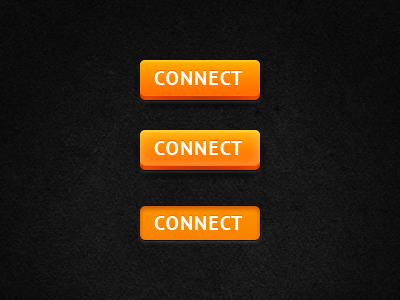
<style>
.page{position:relative;width:400px;height:300px}
.page>*{position:absolute;margin:0}
.t1{font:20px "PTSans-Bold";letter-spacing:0.05em;color:#ffffff}
</style>
<div class="page">
<p class="t1" style="left:154px;top:71px;width:89px;height:14px">CONNECT</p>
<p class="t1" style="left:154px;top:141px;width:89px;height:14px">CONNECT</p>
<p class="t1" style="left:154px;top:216px;width:89px;height:14px">CONNECT</p>
</div>
